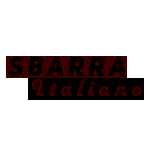
<style>
.page{position:relative;width:150px;height:150px;background:#ffffff}
.page>*{position:absolute;margin:0}
.t1{font:26px "UniSansHeavyItalicCAPS";letter-spacing:0.15em;color:#000000}
.t2{font:26px "HarlowSolid";letter-spacing:0.15em;color:#3a0000}
</style>
<div class="page">
<p class="t1" style="left:8px;top:57px;width:117px;height:19px">Sbarra</p>
<p class="t2" style="left:31px;top:79px;width:111px;height:17px">Italiano</p>
</div>
